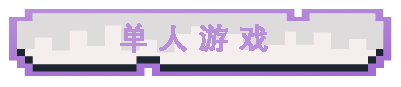
<style>
.page{position:relative;width:401px;height:87px;background:#ffffff}
.page>*{position:absolute;margin:0}
.t1{font:30px "DengXian-Bold";color:#ba8fd9;font-weight:bold}
</style>
<div class="page">
<p class="t1" style="left:120px;top:23px;width:148px;height:30px">单 人 游 戏</p>
</div>
